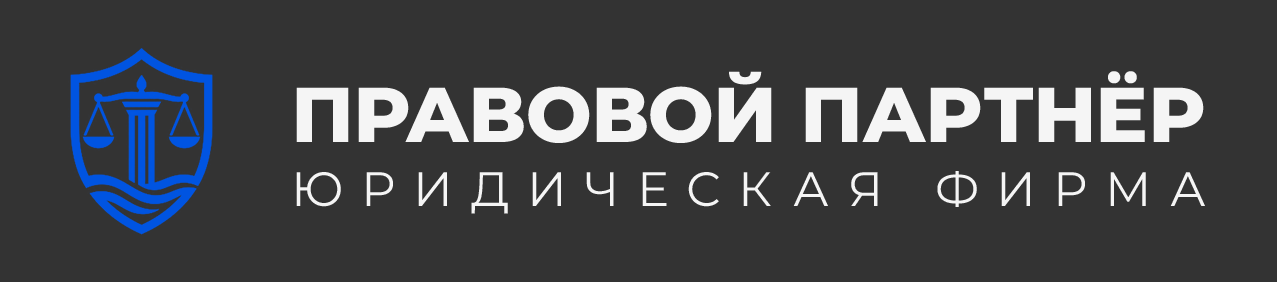
<style>
.page{position:relative;width:1277px;height:282px;background:#333333}
.page>*{position:absolute;margin:0}
.t1{font:77.6px "Montserrat-ExtraBold";color:#ffffff}
.t2{font:48.2px "Montserrat-Regular";letter-spacing:0.4em;color:#ffffff;text-transform:uppercase}
</style>
<div class="page">
<p class="t1" style="left:296px;top:71px;width:908px;height:72px;opacity:0.95">ПРАВОВОЙ ПАРТНЁР</p>
<p class="t2" style="left:296px;top:171px;width:909px;height:43px;opacity:0.95">юридическая фирма</p>
</div>
